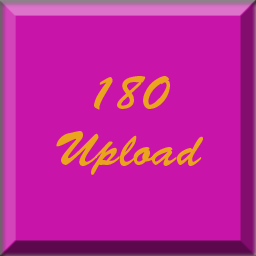
<style>
.page{position:relative;width:256px;height:256px;background:#c814a8}
.page>*{position:absolute;margin:0}
.t1{font:48px "BrushScriptStd";color:#eaa41d}
</style>
<div class="page">
<p class="t1" style="left:56px;top:76px;width:147px;height:99px;text-align:center">180<br>Upload</p>
</div>
